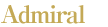
<style>
.page{position:relative;width:108px;height:27px;background:#ffffff}
.page>*{position:absolute;margin:0}
.t1{font:24px "RyuminPro-ExBold";letter-spacing:-0.08em;color:#c4a956}
</style>
<div class="page">
<p class="t1" style="left:1px;top:5px;width:84px;height:19px">Admiral</p>
</div>
